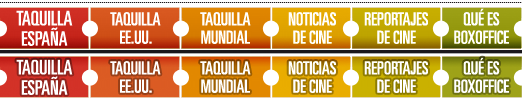
<style>
.page{position:relative;width:522px;height:98px;background:#ffffff}
.page>*{position:absolute;margin:0}
.t1{font:20px/18px "UniversLTStd-UltraCn";color:#ffffff}
.t2{font:18px/16px "UniversLTStd-UltraCn";color:#ffffff}
</style>
<div class="page">
<p class="t1" style="left:16px;top:10px;width:57px;height:36px;text-align:center">TAQUILLA<br>ESPAÑA</p>
<p class="t2" style="left:110px;top:12px;width:51px;height:32px;text-align:center">TAQUILLA<br>EE.UU.</p>
<p class="t2" style="left:200px;top:12px;width:51px;height:32px;text-align:center">TAQUILLA<br>MUNDIAL</p>
<p class="t2" style="left:288px;top:12px;width:48px;height:32px;text-align:center">NOTICIAS<br>DE CINE</p>
<p class="t2" style="left:364px;top:12px;width:64px;height:32px;text-align:center">REPORTAJES<br>DE CINE</p>
<p class="t2" style="left:454px;top:8px;width:55px;height:36px;text-align:center">QUÉ ES<br>BOXOFFICE</p>
<p class="t1" style="left:16px;top:59px;width:57px;height:36px;text-align:center">TAQUILLA<br>ESPAÑA</p>
<p class="t2" style="left:110px;top:61px;width:51px;height:32px;text-align:center">TAQUILLA<br>EE.UU.</p>
<p class="t2" style="left:200px;top:61px;width:51px;height:32px;text-align:center">TAQUILLA<br>MUNDIAL</p>
<p class="t2" style="left:288px;top:61px;width:48px;height:32px;text-align:center">NOTICIAS<br>DE CINE</p>
<p class="t2" style="left:364px;top:61px;width:64px;height:32px;text-align:center">REPORTAJES<br>DE CINE</p>
<p class="t2" style="left:454px;top:57px;width:55px;height:36px;text-align:center">QUÉ ES<br>BOXOFFICE</p>
</div>
